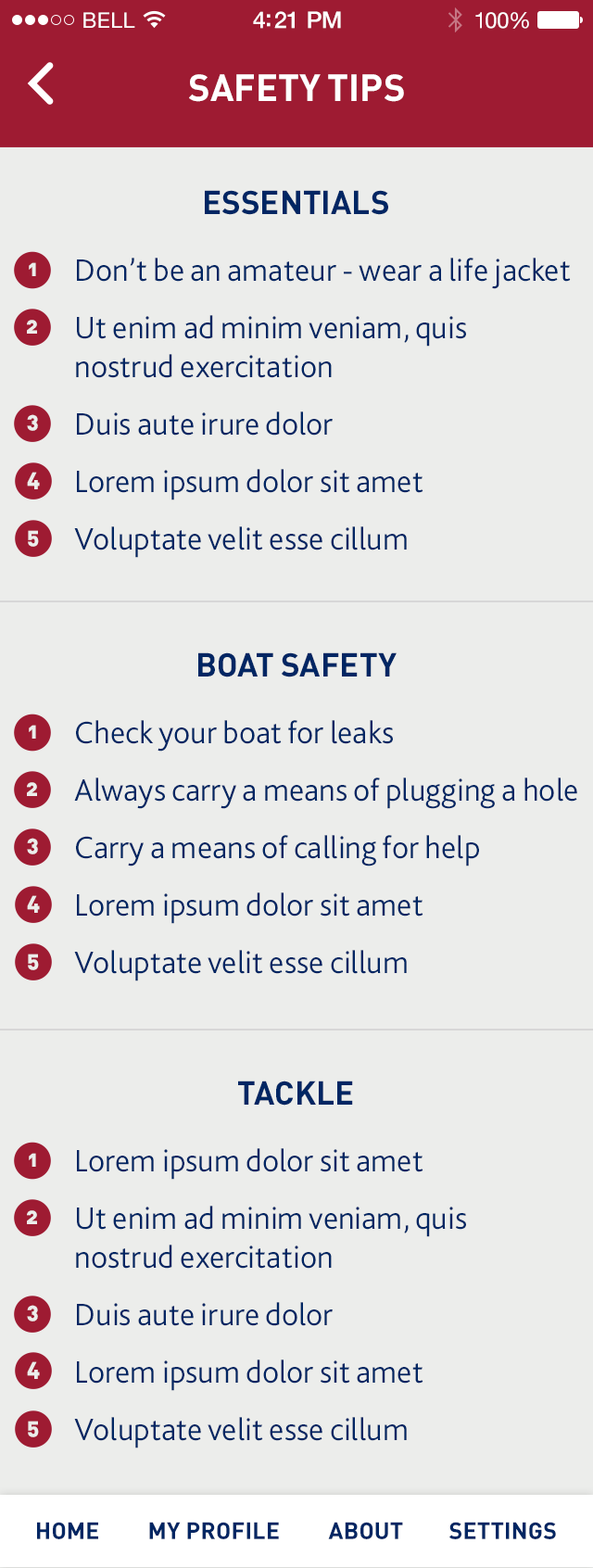
<style>
.page{position:relative;width:593px;height:1568px;background:#ecedeb}
.page>*{position:absolute;margin:0}
.t1{font:21.3px "HelveticaNeue";letter-spacing:0.02em;color:#ffffff}
.t2{font:23.2px "HelveticaNeue-Medium";letter-spacing:-0.02em;color:#ffffff}
.t3{font:22.2px "HelveticaNeue";letter-spacing:-0.02em;color:#ffffff}
.t4{font:37.1px "DIN-Bold";color:#ffffff;text-transform:uppercase}
.t5{font:32.4px "DIN-Bold";color:#002663;text-transform:uppercase}
.t6{font:32.4px "Bliss2-Light";color:#002663}
.t7{font:22.1px "DIN-BlackAlternate";color:#ecedeb}
.t8{font:23.2px "DIN-Bold";letter-spacing:0.01em;color:#002663;text-transform:uppercase}
</style>
<div class="page">
<p class="t1" style="left:83px;top:12px;width:52px;height:16px">BELL</p>
<p class="t2" style="left:253px;top:11px;width:88px;height:18px">4:21 PM</p>
<p class="t3" style="left:475px;top:12px;width:54px;height:17px">100%</p>
<p class="t4" style="left:189px;top:74px;width:215px;height:28px">Safety tips</p>
<p class="t5" style="left:205px;top:190px;width:183px;height:25px">essentials</p>
<p class="t6" style="left:74px;top:258px;width:497px;height:300px">Don’t be an amateur - wear a life jacket <br>Ut enim ad minim veniam, quis<br>nostrud exercitation<br>Duis aute irure dolor<br>Lorem ipsum dolor sit amet<br>Voluptate velit esse cillum</p>
<p class="t7" style="left:29px;top:262px;width:7px;height:14px">1</p>
<p class="t7" style="left:27px;top:320px;width:10px;height:14px">2</p>
<p class="t7" style="left:27px;top:414px;width:11px;height:17px">3</p>
<p class="t7" style="left:27px;top:472px;width:13px;height:17px">4</p>
<p class="t7" style="left:28px;top:530px;width:11px;height:17px">5</p>
<p class="t5" style="left:198px;top:652px;width:199px;height:25px">boat safety</p>
<p class="t7" style="left:29px;top:725px;width:7px;height:14px">1</p>
<p class="t6" style="left:74px;top:720px;width:503px;height:261px">Check your boat for leaks<br>Always carry a means of plugging a hole<br>Carry a means of calling for help<br>Lorem ipsum dolor sit amet<br>Voluptate velit esse cillum</p>
<p class="t7" style="left:27px;top:782px;width:10px;height:14px">2</p>
<p class="t7" style="left:27px;top:838px;width:11px;height:16px">3</p>
<p class="t7" style="left:27px;top:895px;width:13px;height:18px">4</p>
<p class="t7" style="left:28px;top:954px;width:11px;height:16px">5</p>
<p class="t5" style="left:238px;top:1081px;width:115px;height:25px">tackle</p>
<p class="t7" style="left:29px;top:1153px;width:7px;height:14px">1</p>
<p class="t6" style="left:74px;top:1148px;width:392px;height:300px">Lorem ipsum dolor sit amet<br>Ut enim ad minim veniam, quis<br>nostrud exercitation<br>Duis aute irure dolor<br>Lorem ipsum dolor sit amet<br>Voluptate velit esse cillum</p>
<p class="t7" style="left:27px;top:1210px;width:10px;height:14px">2</p>
<p class="t7" style="left:27px;top:1305px;width:11px;height:16px">3</p>
<p class="t7" style="left:27px;top:1361px;width:13px;height:18px">4</p>
<p class="t7" style="left:28px;top:1421px;width:11px;height:16px">5</p>
<p class="t8" style="left:37px;top:1522px;width:61px;height:17px">Home</p>
<p class="t8" style="left:149px;top:1522px;width:130px;height:17px">My Profile</p>
<p class="t8" style="left:328px;top:1522px;width:75px;height:17px">About</p>
<p class="t8" style="left:449px;top:1522px;width:107px;height:17px">Settings</p>
</div>
